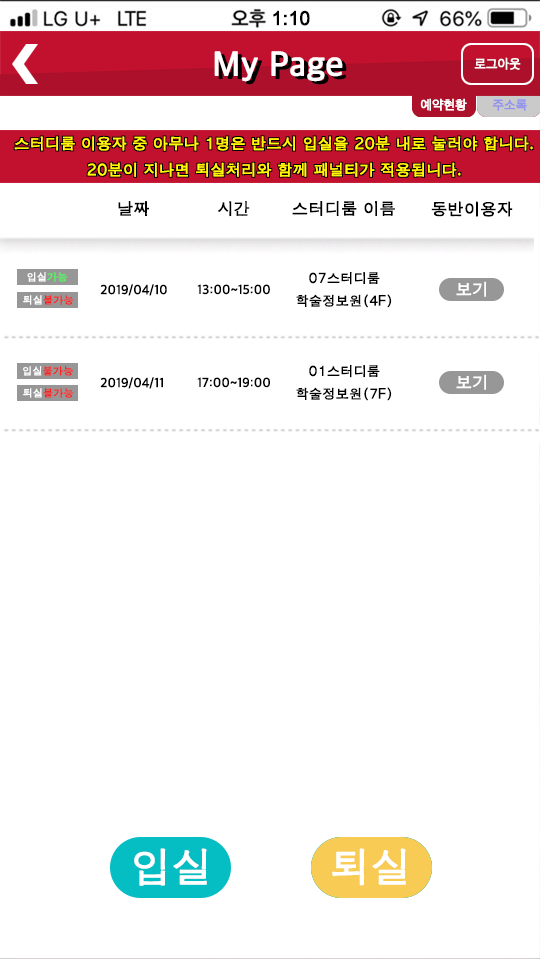
<style>
.page{position:relative;width:540px;height:960px;background:#ffffff}
.page>*{position:absolute;margin:0}
.t1{font:19px "ArialUnicodeMS";color:#000000;font-weight:bold}
.t2{font:35px "AppleSDGothicNeo-Regular";color:#ffffff;font-weight:bold}
.t3{font:13px "AppleSDGothicNeo-Regular";color:#ffffff;font-weight:bold}
.t4{font:13px "AppleSDGothicNeo-Regular";color:#9393ef;font-weight:bold}
.t5{font:15px "AppleGothic";color:#fffc00;font-weight:bold}
.t6{font:16px "AppleGothic";color:#000000;font-weight:bold}
.t7{font:13px "AppleGothic";color:#000000;font-weight:bold}
.t8{font:13px "AppleSDGothicNeo-Regular";color:#000000;font-weight:bold}
.t9{font:40px "AppleGothic";color:#ffffff;font-weight:bold}
</style>
<div class="page">
<p class="t1" style="left:273px;top:10px;width:37px;height:16px">1:10</p>
<p class="t2" style="left:214px;top:51px;width:129px;height:31px">My Page</p>
<p class="t3" style="left:474px;top:57px;width:47px;height:13px">로그아웃</p>
<p class="t3" style="left:420px;top:98px;width:47px;height:13px">예약현황</p>
<p class="t4" style="left:492px;top:99px;width:35px;height:12px">주소록</p>
<p class="t5" style="left:14px;top:136px;width:519px;height:41px;text-align:center">스터디룸 이용자 중 아무나 1명은 반드시 입실을 20분 내로 눌러야 합니다.<br>20분이 지나면 퇴실처리와 함께 패널티가 적용됩니다.</p>
<p class="t6" style="left:118px;top:201px;width:31px;height:15px">날짜</p>
<p class="t6" style="left:218px;top:201px;width:32px;height:16px">시간</p>
<p class="t6" style="left:292px;top:201px;width:103px;height:15px">스터디룸 이름</p>
<p class="t6" style="left:431px;top:201px;width:82px;height:16px">동반이용자</p>
<p class="t7" style="left:296px;top:272px;width:96px;height:36px;text-align:center">07스터디룸<br>학술정보원(4F)</p>
<p class="t8" style="left:100px;top:284px;width:67px;height:12px">2019/04/10</p>
<p class="t8" style="left:197px;top:284px;width:73px;height:11px">13:00~15:00</p>
<p class="t7" style="left:296px;top:365px;width:96px;height:36px;text-align:center">01스터디룸<br>학술정보원(7F)</p>
<p class="t8" style="left:100px;top:377px;width:63px;height:12px">2019/04/11</p>
<p class="t8" style="left:197px;top:377px;width:73px;height:11px">17:00~19:00</p>
<p class="t9" style="left:134px;top:848px;width:73px;height:38px">입실</p>
<p class="t9" style="left:332px;top:848px;width:74px;height:38px">퇴실</p>
</div>
